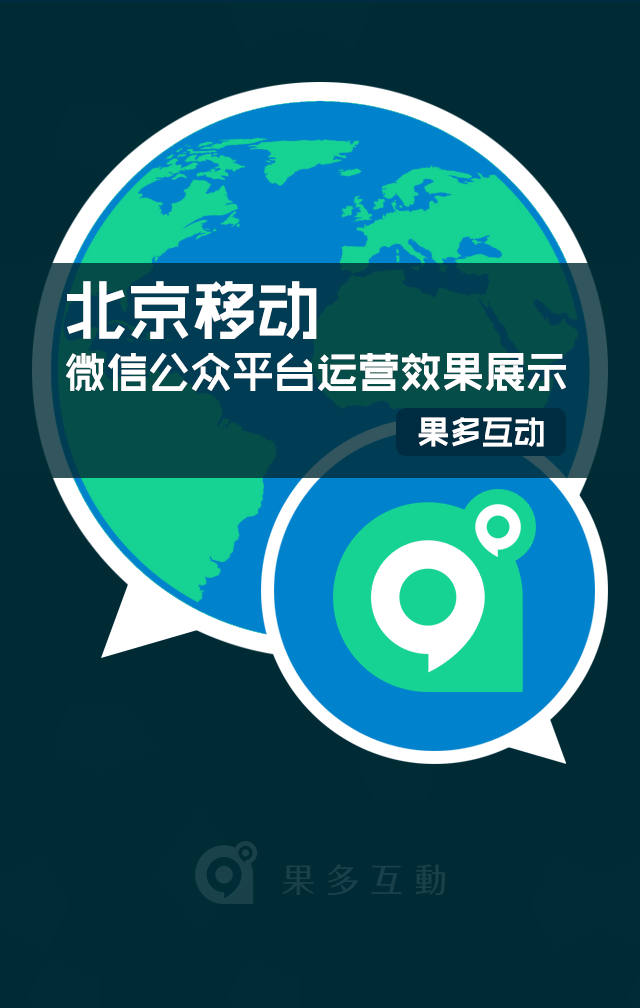
<style>
.page{position:relative;width:640px;height:1008px;background:#002b35}
.page>*{position:absolute;margin:0}
.t1{font:42px/53.5px "RTWSShangGoG0v1-Bold";color:#ffffff}
.t2{font:64px/53.5px "RTWSShangGoG0v1-Bold";color:#ffffff}
.t3{font:32px "RTWSShangGoG0v1-Bold";color:#ffffff}
</style>
<div class="page">
<p class="t1" style="left:66px;top:281px;width:500px;height:110px"><span class="t2">北京移动<br></span>微信公众平台运营效果展示</p>
<p class="t3" style="left:418px;top:417px;width:126px;height:30px">果多互动</p>
</div>
